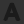
<style>
.page{position:relative;width:24px;height:24px;background:#333333}
.page>*{position:absolute;margin:0}
.t1{font:26px "LucidaConsole";color:#1b1b1b}
</style>
<div class="page">
<p class="t1" style="left:4px;top:3px;width:16px;height:17px">A</p>
</div>
